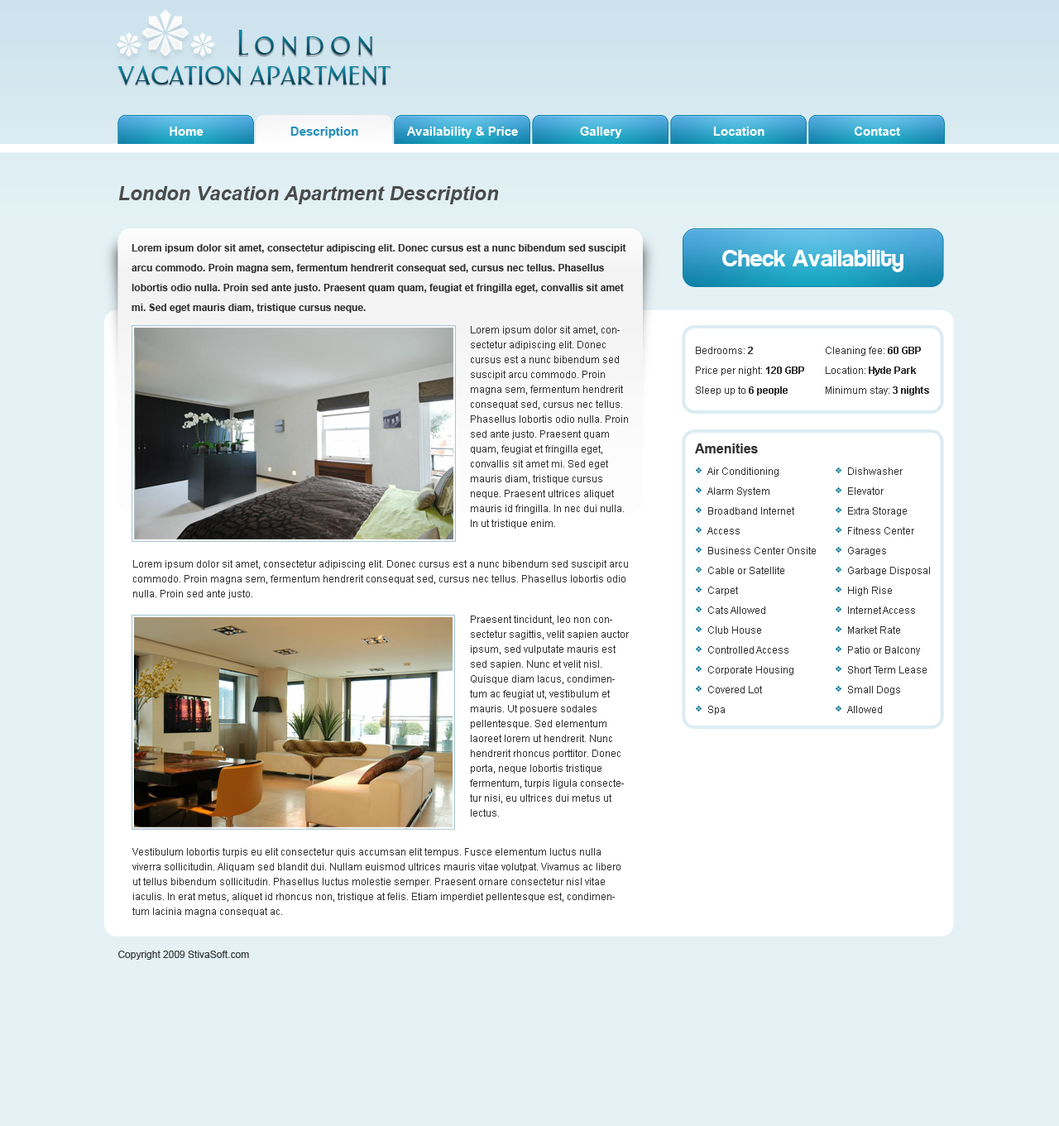
<style>
.page{position:relative;width:1059px;height:1126px;background:#e5f1f5}
.page>*{position:absolute;margin:0}
.t1{font:29.8px "AphasiaBT-Roman";letter-spacing:0.2em}
.t2{font:29.8px "AphasiaBT-Roman"}
.t3{font:12.4px "Arial-BoldMT";color:#ffffff}
.t4{font:12.4px "Arial-BoldMT";color:#2690ba}
.t5{font:19.9px "Arial-BoldItalicMT";color:#4a4c4c}
.t6{font:9.9px/19.9px "Arial-BoldMT";color:#323232}
.t7{font:23.2px "Coolvetica";color:#ffffff}
.t8{font:9.9px/14.9px "ArialMT";color:#323232}
.t9{font:9.9px/19.9px "ArialMT";color:#323232}
.t10{font:13.2px "Arial-BoldMT";color:#323232}
.t11{font:9.9px "ArialMT";color:#393d3d}
</style>
<div class="page">
<p class="t1" style="left:238px;top:30px;width:134px;height:25px">London</p>
<p class="t2" style="left:117px;top:65px;width:274px;height:20px">vacation apartment</p>
<p class="t3" style="left:170px;top:127px;width:34px;height:9px">Home</p>
<p class="t4" style="left:290px;top:127px;width:68px;height:11px">Description</p>
<p class="t3" style="left:406px;top:127px;width:112px;height:11px">Availability &amp; Price</p>
<p class="t3" style="left:580px;top:127px;width:42px;height:11px">Gallery</p>
<p class="t3" style="left:713px;top:127px;width:51px;height:9px">Location</p>
<p class="t3" style="left:854px;top:127px;width:46px;height:9px">Contact</p>
<p class="t5" style="left:119px;top:186px;width:380px;height:18px">London Vacation Apartment Description</p>
<p class="t6" style="left:132px;top:244px;width:494px;height:69px">Lorem ipsum dolor sit amet, consectetur adipiscing elit. Donec cursus est a nunc bibendum sed suscipit arcu commodo. Proin magna sem, fermentum hendrerit consequat sed, cursus nec tellus. Phasellus lobortis odio nulla. Proin sed ante justo. Praesent quam quam, feugiat et fringilla eget, convallis sit amet mi. Sed eget mauris diam, tristique cursus neque.</p>
<p class="t7" style="left:722px;top:250px;width:181px;height:22px">Check Availability</p>
<p class="t8" style="left:471px;top:326px;width:157px;height:203px">Lorem ipsum dolor sit amet, consectetur adipiscing elit. Donec cursus est a nunc bibendum sed suscipit arcu commodo. Proin magna sem, fermentum hendrerit consequat sed, cursus nec tellus. Phasellus lobortis odio nulla. Proin sed ante justo. Praesent quam quam, feugiat et fringilla eget, convallis sit amet mi. Sed eget mauris diam, tristique cursus neque. Praesent ultrices aliquet mauris id fringilla. In nec dui nulla. In ut tristique enim.</p>
<p class="t9" style="left:696px;top:347px;width:108px;height:48px">Bedrooms: <span class="t6">2<br></span>Price per night: <span class="t6">120 GBP<br></span>Sleep up to <span class="t6">6 people</span></p>
<p class="t9" style="left:826px;top:347px;width:103px;height:48px">Cleaning fee:<span class="t6"> 60 GBP<br></span>Location: <span class="t6">Hyde Park<br></span>Minimum stay: <span class="t6">3 nights</span></p>
<p class="t10" style="left:695px;top:443px;width:63px;height:10px">Amenities</p>
<p class="t9" style="left:707px;top:467px;width:109px;height:248px">Air Conditioning<br>Alarm System <br>Broadband Internet Access<br>Business Center Onsite <br>Cable or Satellite <br>Carpet<br>Cats Allowed<br>Club House <br>Controlled Access<br>Corporate Housing<br>Covered Lot<br>Spa</p>
<p class="t9" style="left:847px;top:467px;width:83px;height:246px">Dishwasher <br>Elevator<br>Extra Storage<br>Fitness Center<br>Garages<br>Garbage Disposal<br>High Rise <br>Internet Access<br>Market Rate<br>Patio or Balcony<br>Short Term Lease<br>Small Dogs Allowed</p>
<p class="t8" style="left:133px;top:560px;width:495px;height:39px">Lorem ipsum dolor sit amet, consectetur adipiscing elit. Donec cursus est a nunc bibendum sed suscipit arcu commodo. Proin magna sem, fermentum hendrerit consequat sed, cursus nec tellus. Phasellus lobortis odio nulla. Proin sed ante justo.</p>
<p class="t8" style="left:470px;top:616px;width:159px;height:201px">Praesent tincidunt, leo non consectetur sagittis, velit sapien auctor ipsum, sed vulputate mauris est sed sapien. Nunc et velit nisl. Quisque diam lacus, condimentum ac feugiat ut, vestibulum et mauris. Ut posuere sodales pellentesque. Sed elementum laoreet lorem ut hendrerit. Nunc hendrerit rhoncus porttitor. Donec porta, neque lobortis tristique fermentum, turpis ligula consectetur nisi, eu ultrices dui metus ut lectus.</p>
<p class="t8" style="left:132px;top:848px;width:489px;height:69px">Vestibulum lobortis turpis eu elit consectetur quis accumsan elit tempus. Fusce elementum luctus nulla viverra sollicitudin. Aliquam sed blandit dui. Nullam euismod ultrices mauris vitae volutpat. Vivamus ac libero ut tellus bibendum sollicitudin. Phasellus luctus molestie semper. Praesent ornare consectetur nisl vitae iaculis. In erat metus, aliquet id rhoncus non, tristique at felis. Etiam imperdiet pellentesque est, condimentum lacinia magna consequat ac.</p>
<p class="t11" style="left:118px;top:951px;width:131px;height:9px">Copyright 2009 StivaSoft.com</p>
</div>
